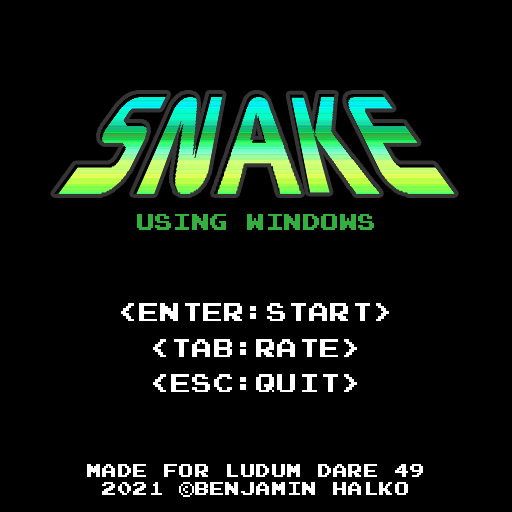
<style>
.page{position:relative;width:512px;height:512px;background:#000000}
.page>*{position:absolute;margin:0}
.t1{font:18px "PressStart2P";letter-spacing:0.025em;color:#32af3c}
.t2{font:20.7px "PressStart2P";letter-spacing:0.025em;color:#ffffff}
.t3{font:15px "PressStart2P";letter-spacing:0.025em;color:#ffffff}
</style>
<div class="page">
<p class="t1" style="left:137px;top:214px;width:237px;height:16px">USING WINDOWS</p>
<p class="t2" style="left:121px;top:303px;width:268px;height:89px;text-align:center">&lt;ENTER:START&gt;<br><br>&lt;TAB:RATE&gt;<br><br>&lt;ESC:QUIT&gt;</p>
<p class="t3" style="left:87px;top:464px;width:336px;height:33px;text-align:center">MADE FOR LUDUM DARE 49<br>2021 ©BENJAMIN HALKO</p>
</div>
